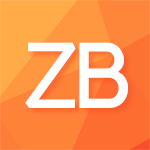
<style>
.page{position:relative;width:150px;height:150px}
.page>*{position:absolute;margin:0}
.t1{font:93.7px "Code-Bold";color:#ffffff}
</style>
<div class="page">
<p class="t1" style="left:25px;top:42px;width:103px;height:66px">zb</p>
</div>
